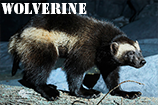
<style>
.page{position:relative;width:158px;height:105px}
.page>*{position:absolute;margin:0}
.t1{font:14px "StencilStd";color:#ffffff}
</style>
<div class="page">
<p class="t1" style="left:1px;top:3px;width:86px;height:11px">Wolverine</p>
</div>
